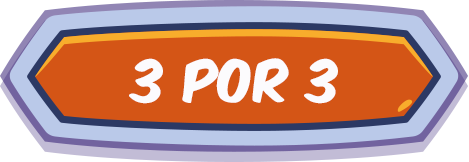
<style>
.page{position:relative;width:469px;height:162px;background:#d45516}
.page>*{position:absolute;margin:0}
.t1{font:50px "KomikaAxis";color:#fcfbfd}
</style>
<div class="page">
<p class="t1" style="left:129px;top:58px;width:209px;height:46px">3 por 3</p>
</div>
